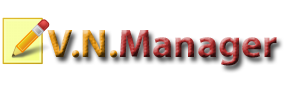
<style>
.page{position:relative;width:285px;height:85px;background:#ffffff}
.page>*{position:absolute;margin:0}
.t1{font:40px "MyriadPro-Bold"}
</style>
<div class="page">
<p class="t1" style="left:47px;top:30px;width:230px;height:36px">V.N.Manager</p>
</div>
